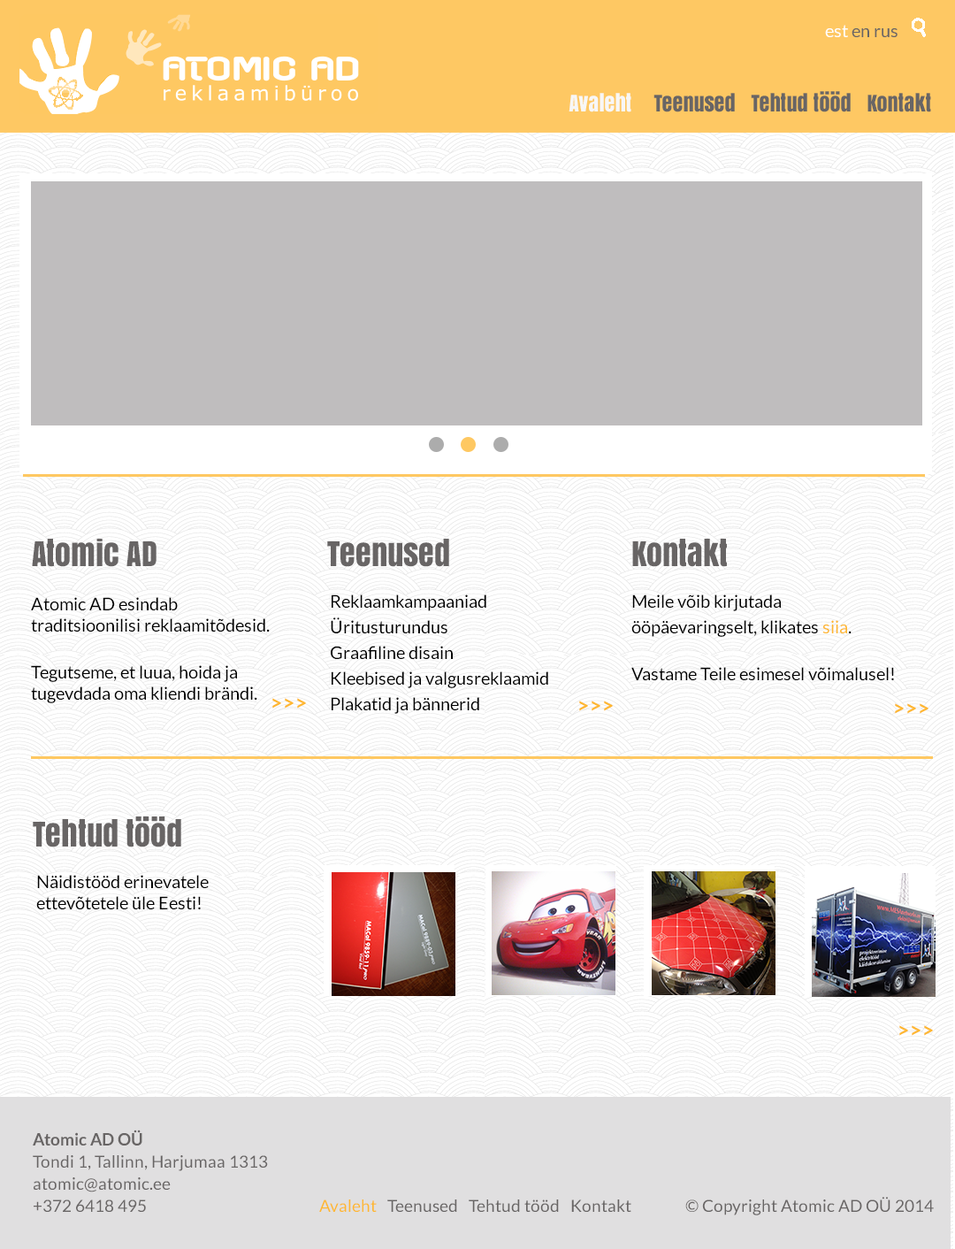
<style>
.page{position:relative;width:955px;height:1249px;background:#ffffff}
.page>*{position:absolute;margin:0}
.t1{font:17.7px "Lato-Regular";color:#686565}
.t2{font:17.7px "Lato-Regular";color:#ffffff}
.t3{font:21.2px "Anton";color:#686565}
.t4{font:21.2px "Anton";color:#f8f7f6}
.t5{font:31.8px "Anton";color:#686565}
.t6{font:17.7px/21.2px "Lato-Regular";color:#000000}
.t7{font:17.7px/21.2px "Lato-Regular";color:#feb730}
.t8{font:21.2px "Lato-Bold";color:#feb730}
.t9{font:16.8px/17.7px "Lato-Regular";color:#686565}
.t10{font:16.8px/17.7px "Lato-Bold";color:#686565}
.t11{font:16.8px "Lato-Regular";color:#686565}
.t12{font:16.8px "Lato-Regular";color:#feb730}
</style>
<div class="page">
<p class="t1" style="left:825px;top:25px;width:73px;height:12px"><span class="t2">est </span>en rus</p>
<p class="t3" style="left:569px;top:91px;width:362px;height:21px"><span class="t4">Avaleht    </span> Teenused   Tehtud tööd   Kontakt</p>
<p class="t5" style="left:32px;top:539px;width:125px;height:28px">Atomic AD</p>
<p class="t5" style="left:327px;top:539px;width:122px;height:28px">Teenused</p>
<p class="t5" style="left:632px;top:539px;width:95px;height:28px">Kontakt</p>
<p class="t6" style="left:31px;top:597px;width:239px;height:106px">Atomic AD esindab <br>traditsioonilisi reklaamitõdesid. <br><br>Tegutseme, et luua, hoida ja tugevdada oma kliendi brändi.</p>
<p class="t6" style="left:331px;top:594px;width:217px;height:120px">Reklaamkampaaniad<br>Üritusturundus<br>Graafiline disain<br>Kleebised ja valgusreklaamid<br>Plakatid ja bännerid</p>
<p class="t6" style="left:631px;top:594px;width:263px;height:86px">Meile võib kirjutada <br>ööpäevaringselt, klikates <span class="t7">siia</span>.<br><br>Vastame Teile esimesel võimalusel!</p>
<p class="t8" style="left:272px;top:698px;width:34px;height:10px">&gt;&gt;&gt;</p>
<p class="t8" style="left:579px;top:700px;width:34px;height:11px">&gt;&gt;&gt;</p>
<p class="t8" style="left:895px;top:703px;width:33px;height:11px">&gt;&gt;&gt;</p>
<p class="t5" style="left:33px;top:816px;width:148px;height:31px">Tehtud tööd</p>
<p class="t6" style="left:36px;top:875px;width:173px;height:34px">Näidistööd erinevatele ettevõtetele üle Eesti!</p>
<p class="t8" style="left:899px;top:1025px;width:34px;height:10px">&gt;&gt;&gt;</p>
<p class="t9" style="left:33px;top:1129px;width:235px;height:82px"><span class="t10">Atomic AD OÜ<br></span>Tondi 1, Tallinn, Harjumaa 1313<br>atomic@atomic.ee<br>+372 6418 495</p>
<p class="t11" style="left:319px;top:1199px;width:312px;height:12px"><span class="t12">Avaleht   </span>Teenused   Tehtud tööd   Kontakt</p>
<p class="t11" style="left:685px;top:1196px;width:249px;height:19px">© Copyright Atomic AD OÜ 2014</p>
</div>
